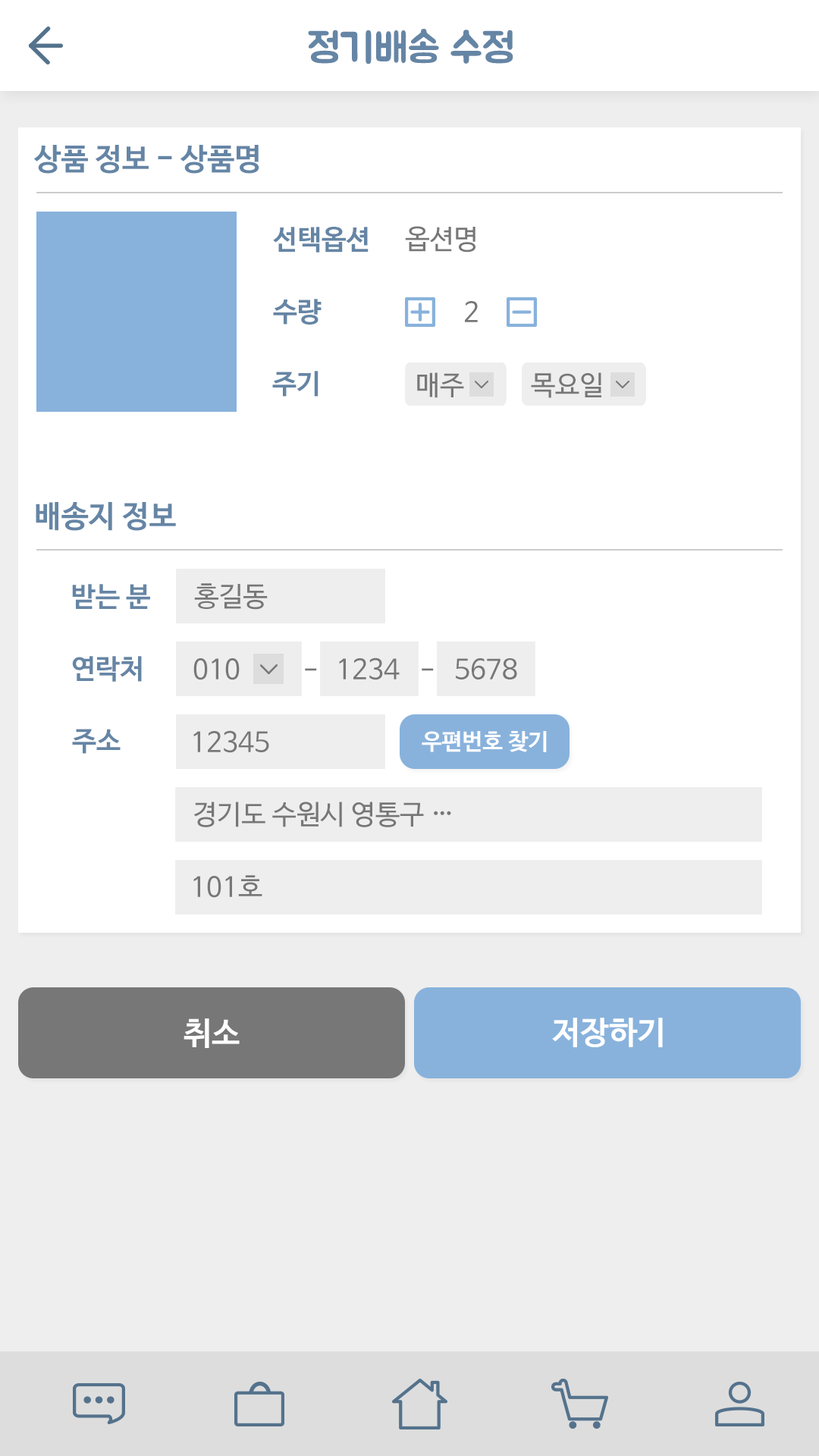
<style>
.page{position:relative;width:819px;height:1456px;background:#ffffff}
.page>*{position:absolute;margin:0}
.t1{font:40.9px "BMJUA";color:#6585a5}
.t2{font:30.3px "NanumBarunGothicBold";color:#6585a5}
.t3{font:27.3px "NanumBarunGothicBold";color:#6585a5}
.t4{font:27.3px "NanumBarunGothic";color:#777777}
.t5{font:22.7px "NanumBarunGothicBold";color:#ffffff}
.t6{font:31.8px "NanumBarunGothicBold";color:#ffffff}
</style>
<div class="page">
<p class="t1" style="left:308px;top:29px;width:205px;height:35px">정기배송 수정</p>
<p class="t2" style="left:33px;top:145px;width:226px;height:29px">상품 정보 - 상품명</p>
<p class="t3" style="left:273px;top:227px;width:96px;height:26px">선택옵션</p>
<p class="t4" style="left:405px;top:226px;width:70px;height:27px">옵션명</p>
<p class="t3" style="left:273px;top:299px;width:49px;height:26px">수량</p>
<p class="t4" style="left:465px;top:301px;width:13px;height:21px">2</p>
<p class="t3" style="left:272px;top:371px;width:46px;height:26px">주기</p>
<p class="t4" style="left:417px;top:372px;width:47px;height:26px">매주</p>
<p class="t4" style="left:531px;top:372px;width:70px;height:26px">목요일</p>
<p class="t2" style="left:36px;top:502px;width:140px;height:29px">배송지 정보</p>
<p class="t3" style="left:72px;top:584px;width:78px;height:25px">받는 분</p>
<p class="t4" style="left:194px;top:583px;width:74px;height:27px">홍길동</p>
<p class="t3" style="left:72px;top:656px;width:70px;height:26px">연락처</p>
<p class="t4" style="left:193px;top:658px;width:47px;height:22px">010</p>
<p class="t4" style="left:339px;top:657px;width:61px;height:23px">1234</p>
<p class="t4" style="left:456px;top:658px;width:61px;height:21px">5678</p>
<p class="t4" style="left:305px;top:668px;width:12px;height:3px">-</p>
<p class="t4" style="left:422px;top:668px;width:12px;height:3px">-</p>
<p class="t3" style="left:72px;top:729px;width:49px;height:25px">주소</p>
<p class="t4" style="left:193px;top:730px;width:76px;height:23px">12345</p>
<p class="t5" style="left:422px;top:731px;width:125px;height:21px">우편번호 찾기</p>
<p class="t4" style="left:193px;top:802px;width:258px;height:25px">경기도 수원시 영통구 …</p>
<p class="t4" style="left:193px;top:875px;width:69px;height:23px">101호</p>
<p class="t6" style="left:184px;top:1018px;width:56px;height:30px">취소</p>
<p class="t6" style="left:552px;top:1018px;width:111px;height:29px">저장하기</p>
</div>
